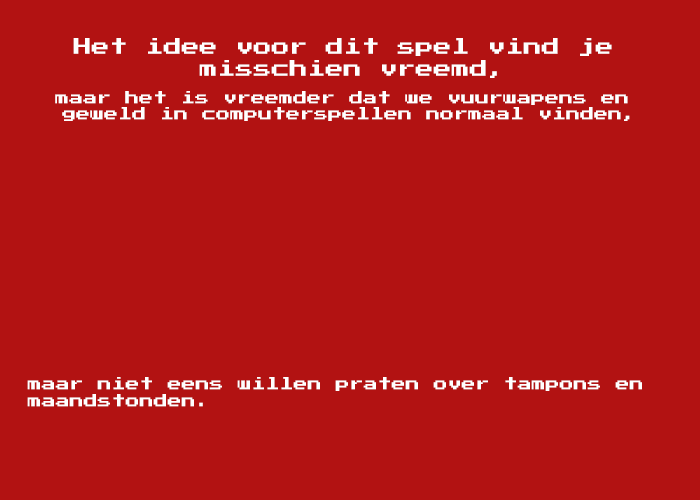
<style>
.page{position:relative;width:700px;height:500px;background:#b21212}
.page>*{position:absolute;margin:0}
.t1{font:18px "PressStart2P";color:#ffffff}
.t2{font:14px "PressStart2P";color:#ffffff}
</style>
<div class="page">
<p class="t1" style="left:73px;top:38px;width:539px;height:40px;text-align:center">Het idee voor dit spel vind je <br>misschien vreemd,</p>
<p class="t2" style="left:55px;top:91px;width:575px;height:30px;text-align:center">maar het is vreemder dat we vuurwapens en <br>geweld in computerspellen normaal vinden,</p>
<p class="t2" style="left:27px;top:377px;width:615px;height:30px">maar niet eens willen praten over tampons en<br>maandstonden.</p>
</div>
